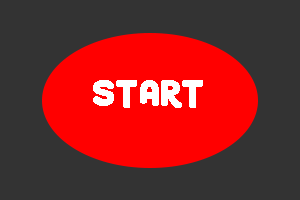
<style>
.page{position:relative;width:300px;height:200px;background:#333333}
.page>*{position:absolute;margin:0}
.t1{font:37.5px "RoundyRainbows";color:#ffffff}
</style>
<div class="page">
<p class="t1" style="left:93px;top:80px;width:110px;height:28px">Start</p>
</div>
